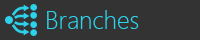
<style>
.page{position:relative;width:200px;height:40px;background:#333333}
.page>*{position:absolute;margin:0}
.t1{font:25px "SegoeUI-Light";color:#2cd1ea}
</style>
<div class="page">
<p class="t1" style="left:47px;top:10px;width:92px;height:19px">Branches</p>
</div>
